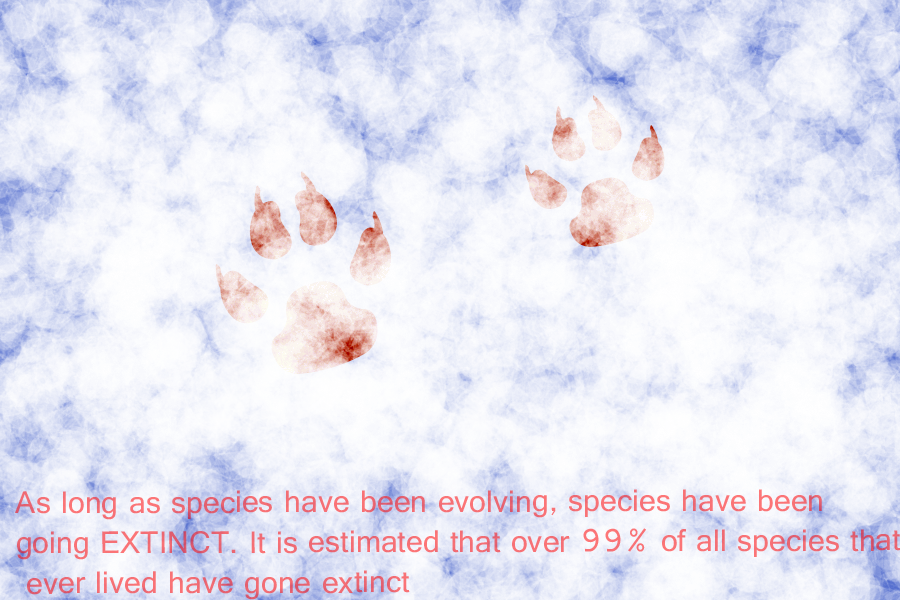
<style>
.page{position:relative;width:900px;height:600px}
.page>*{position:absolute;margin:0}
.t1{font:33.5px "Raavi";color:#f36e75}
</style>
<div class="page">
<p class="t1" style="left:15px;top:489px;width:886px;height:111px">As long as species have been evolving, species have been<br>going EXTINCT. It is estimated that over 99% of all species that<br> ever lived have gone extinct</p>
</div>
